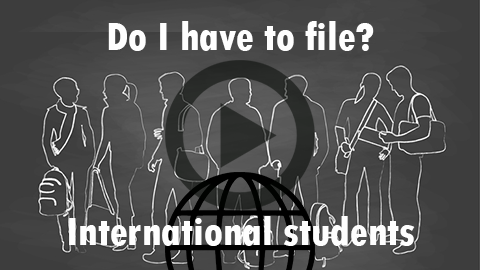
<style>
.page{position:relative;width:480px;height:270px}
.page>*{position:absolute;margin:0}
.t1{font:41.7px "TwCenMT-CondensedExtraBold";color:#fefefe}
</style>
<div class="page">
<p class="t1" style="left:108px;top:21px;width:266px;height:30px">Do I have to file?</p>
<p class="t1" style="left:69px;top:216px;width:346px;height:30px">International students</p>
</div>
